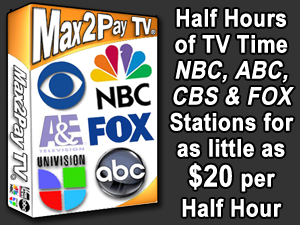
<style>
.page{position:relative;width:300px;height:225px;background:#333333}
.page>*{position:absolute;margin:0}
.t1{font:24px/26px "ArialNarrow-Bold";color:#ffffff;font-weight:bold;scale:1.06 1}
.t2{font:24px/26px "ArialNarrow-Bold";color:#ffffff;font-weight:bold;font-style:italic;scale:1.06 1}
.t3{font:30px/30px "ArialNarrow-Bold";color:#ffffff;font-weight:bold;scale:1.06 1}
.t4{font:30px/28px "ArialNarrow-Bold";color:#ffffff;font-weight:bold;scale:1.06 1}
.t5{font:24px/28px "ArialNarrow-Bold";color:#ffffff;font-weight:bold;scale:1.06 1}
.t6{font:24px/30px "ArialNarrow-Bold";color:#ffffff;font-weight:bold;scale:1.06 1}
</style>
<div class="page">
<p class="t1" style="left:170px;top:8px;width:124px;height:209px;text-align:center">Half Hours<br>of TV Time<br><span class="t2">NBC, ABC,<br>CBS &amp; FOX<br></span>Stations for<br>as little as<br><span class="t3">$2</span><span class="t4">0</span><span class="t5"> pe</span><span class="t6">r<br>Half Ho</span>ur</p>
</div>
